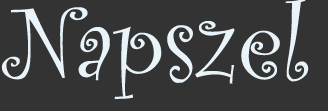
<style>
.page{position:relative;width:328px;height:111px;background:#333333}
.page>*{position:absolute;margin:0}
.t1{font:106.7px "CurlzMT";color:#e8f4fa}
</style>
<div class="page">
<p class="t1" style="left:1px;top:0px;width:308px;height:100px">Napszel</p>
</div>
